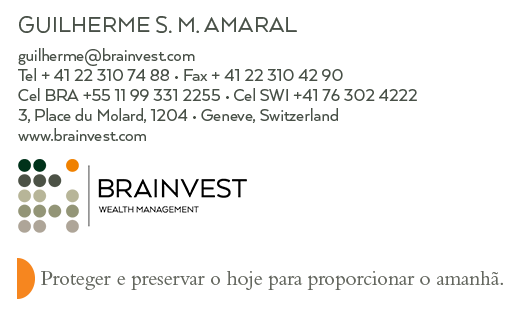
<style>
.page{position:relative;width:531px;height:325px;background:#ffffff}
.page>*{position:absolute;margin:0}
.t1{font:25px "Arquitecta";color:#485047;text-transform:uppercase}
.t2{font:19px/20px "Arquitecta";letter-spacing:-0.005em;color:#485047}
.t3{font:21px "BemboStd";letter-spacing:-0.005em;color:#64675f}
</style>
<div class="page">
<p class="t1" style="left:19px;top:16px;width:278px;height:17px">GUILHERME S. M. AMARAL</p>
<p class="t2" style="left:18px;top:48px;width:399px;height:93px">guilherme@brainvest.com<br>Tel + 41 22 310 74 88 • Fax + 41 22 310 42 90<br>Cel BRA +55 11 99 331 2255 • Cel SWI +41 76 302 4222<br>3, Place du Molard, 1204 • Geneve, Switzerland<br>www.brainvest.com</p>
<p class="t3" style="left:41px;top:271px;width:462px;height:19px">Proteger e preservar o hoje para proporcionar o amanhã.</p>
</div>
